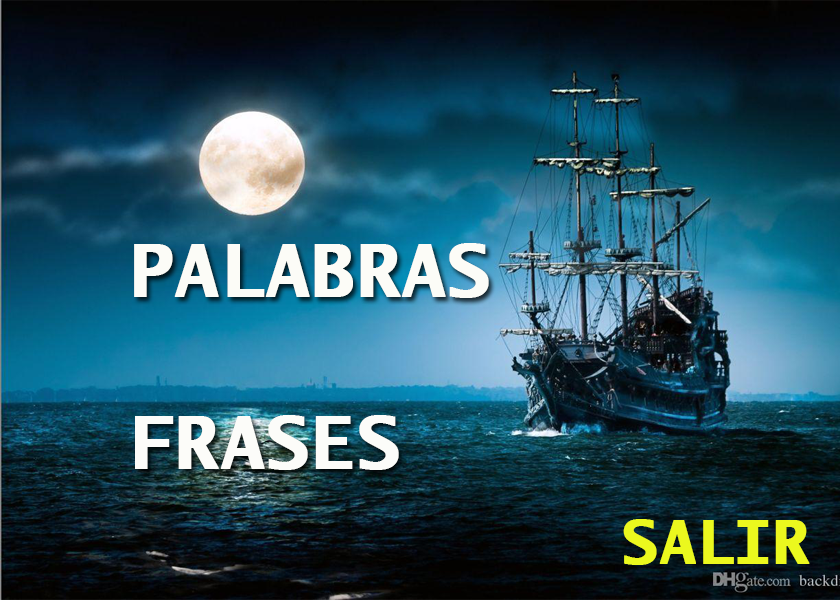
<style>
.page{position:relative;width:840px;height:600px}
.page>*{position:absolute;margin:0}
.t1{font:72px "LucidaSans-TypewriterBold";color:#fcfcf7;font-weight:bold}
.t2{font:72px "LucidaSans-TypewriterBold";color:#fcfcf9;font-weight:bold}
.t3{font:60px "LucidaSans-TypewriterBold";color:#ebf81e;font-weight:bold}
</style>
<div class="page">
<p class="t1" style="left:134px;top:243px;width:355px;height:227px">PALABRAS<br><br><span class="t2">FRASES</span></p>
<p class="t3" style="left:623px;top:519px;width:187px;height:46px">SALIR</p>
</div>
